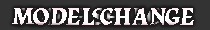
<style>
.page{position:relative;width:210px;height:30px;background:#333333}
.page>*{position:absolute;margin:0}
.t1{font:25px "Vatican-Bold";color:#ffffff}
</style>
<div class="page">
<p class="t1" style="left:12px;top:8px;width:182px;height:17px">MODEL CHANGE</p>
</div>
